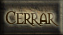
<style>
.page{position:relative;width:63px;height:35px}
.page>*{position:absolute;margin:0}
.t1{font:17px "Morpheus"}
</style>
<div class="page">
<p class="t1" style="left:5px;top:11px;width:55px;height:15px">Cerrar</p>
</div>
